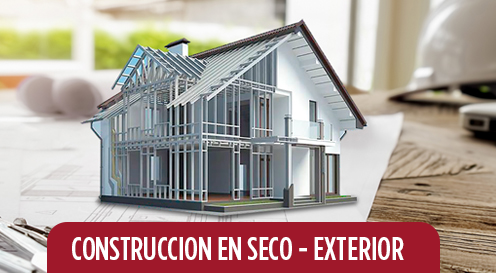
<style>
.page{position:relative;width:496px;height:273px}
.page>*{position:absolute;margin:0}
.t1{font:33px "GothamCond-Medium";color:#ffffff}
</style>
<div class="page">
<p class="t1" style="left:72px;top:237px;width:332px;height:23px">CONSTRUCCION EN SECO - EXTERIOR</p>
</div>
